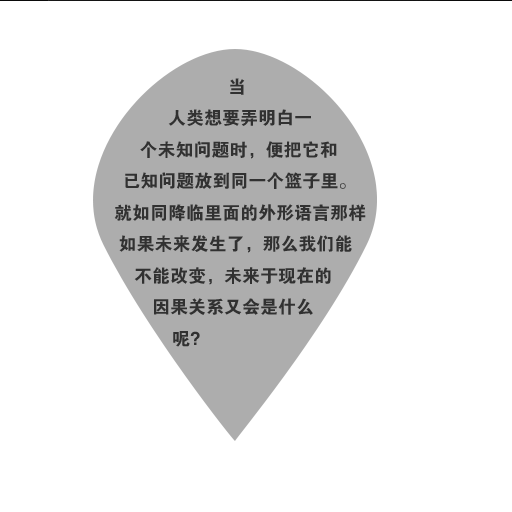
<style>
.page{position:relative;width:512px;height:512px;background:#ffffff}
.page>*{position:absolute;margin:0}
.t1{font:18px "FZDHTJW--GB1-0";color:#313131}
</style>
<div class="page">
<p class="t1" style="left:114px;top:77px;width:252px;height:269px">当人类想要弄明白一个未知问题时，便把它和已知问题放到同一个篮子里。就如同降临里面的外形语言那样如果未来发生了，那么我们能不能改变，未来于现在的因果关系又会是什么呢？</p>
</div>
